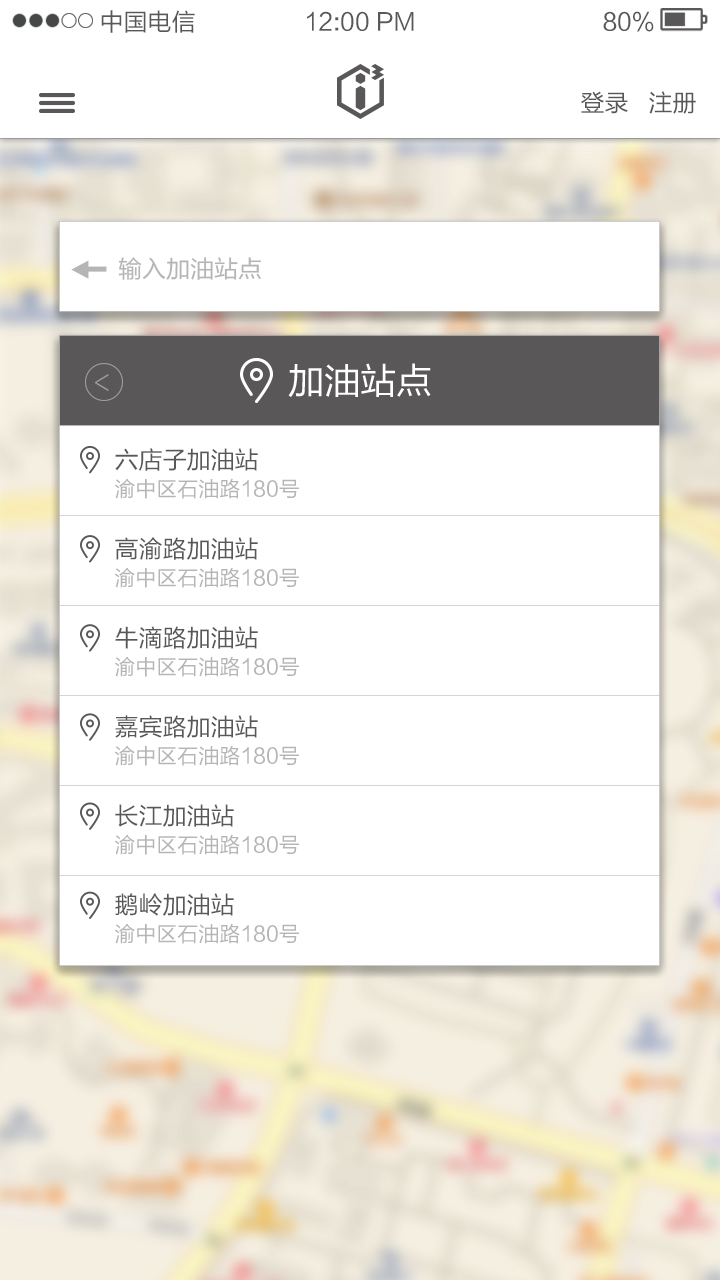
<style>
.page{position:relative;width:720px;height:1280px;background:#ffffff}
.page>*{position:absolute;margin:0}
.t1{font:24px "FZLTHK--GBK1-0";color:#595757}
.t2{font:24px/89px "FZLTHK--GBK1-0";color:#595757}
.t3{font:21px/89px "FZLTHK--GBK1-0";color:#b5b5b6}
</style>
<div class="page">
<p class="t1" style="left:101px;top:10px;width:94px;height:23px">中国电信</p>
<p class="t1" style="left:307px;top:11px;width:107px;height:20px">12:00 PM</p>
<p class="t1" style="left:603px;top:11px;width:51px;height:21px">80%</p>
<p class="t1" style="left:581px;top:91px;width:115px;height:23px">登录   注册</p>
<p class="t2" style="left:115px;top:448px;width:143px;height:468px">六店子加油站<br>高渝路加油站<br>牛滴路加油站<br>嘉宾路加油站<br>长江加油站<br>鹅岭加油站</p>
<p class="t3" style="left:115px;top:478px;width:184px;height:466px">渝中区石油路180号<br>渝中区石油路180号<br>渝中区石油路180号<br>渝中区石油路180号<br>渝中区石油路180号<br>渝中区石油路180号</p>
</div>
